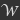
<style>
.page{position:relative;width:20px;height:20px;background:#333333}
.page>*{position:absolute;margin:0}
.t1{font:14.4px "LucidaCalligraphy-Italic";color:#dddddd}
</style>
<div class="page">
<p class="t1" style="left:1px;top:4px;width:18px;height:12px">W</p>
</div>
